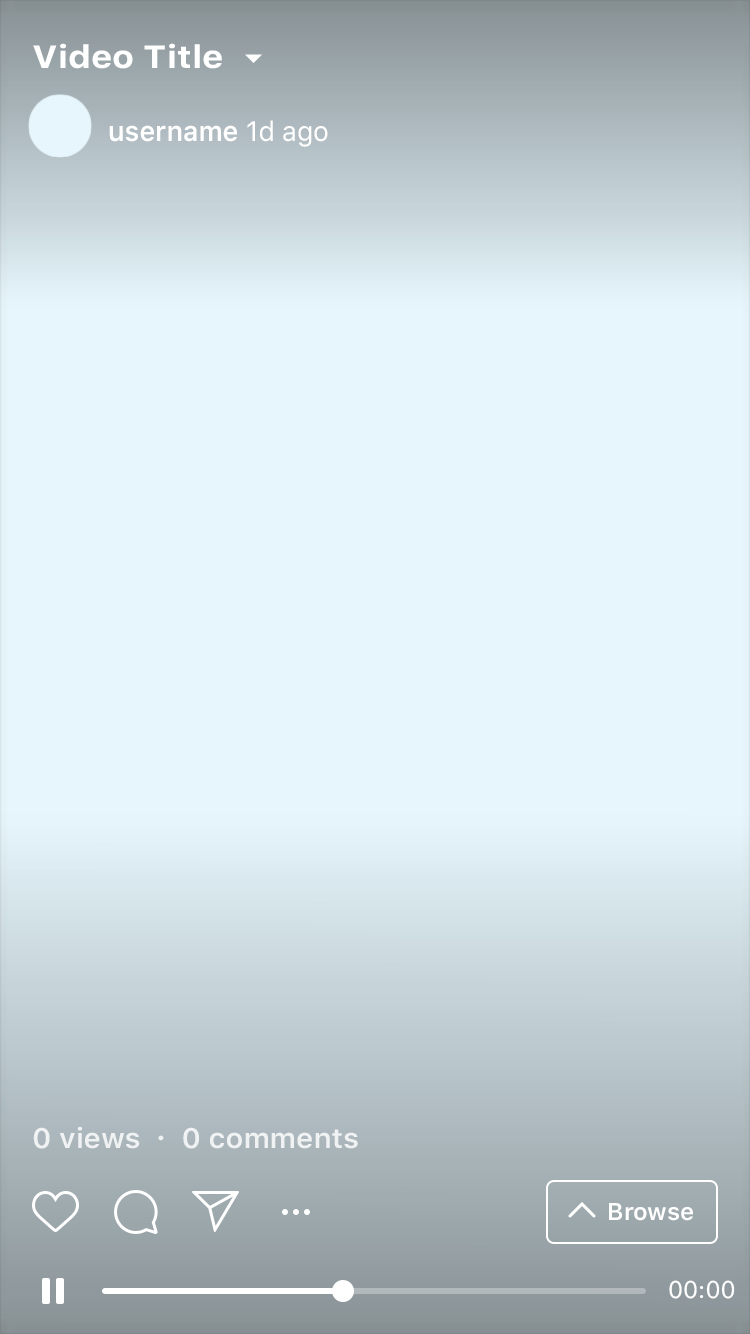
<style>
.page{position:relative;width:750px;height:1334px;background:#e6f6fc}
.page>*{position:absolute;margin:0}
.t1{font:32px "SFUIText-Bold";color:#ffffff;scale:1.11 1}
.t2{font:28px "SFUIText-Semibold";color:#ffffff;scale:0.95 1}
.t3{font:28px "SFUIText-Regular";color:#ffffff;scale:0.95 1}
.t4{font:28px "SFUIText-Semibold";color:#ffffff;scale:1.04 1}
.t5{font:24px "SFProText-Semibold";color:#ffffff}
.t6{font:24px "SFUIText-Regular";color:#ffffff}
</style>
<div class="page">
<p class="t1" style="left:33px;top:43px;width:189px;height:26px">Video Title</p>
<p class="t2" style="left:109px;top:120px;width:219px;height:27px">username<span class="t3"> 1d ago</span></p>
<p class="t4" style="left:33px;top:1126px;width:325px;height:23px;opacity:0.8">0 views  ·  0 comments</p>
<p class="t5" style="left:609px;top:1203px;width:84px;height:18px">Browse</p>
<p class="t6" style="left:669px;top:1280px;width:66px;height:19px">00:00</p>
</div>
